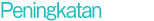
<style>
.page{position:relative;width:154px;height:21px;background:#ffffff}
.page>*{position:absolute;margin:0}
.t1{font:20px "GothicMB101Pro-Regular";letter-spacing:-0.06em;color:#1dbcc0;scale:0.9 1}
</style>
<div class="page">
<p class="t1" style="left:1px;top:2px;width:101px;height:19px">Peningkatan</p>
</div>
